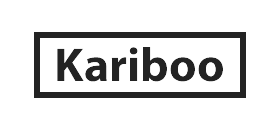
<style>
.page{position:relative;width:276px;height:126px;background:#ffffff}
.page>*{position:absolute;margin:0}
.t1{font:48px "MyriadPro-Bold";color:#232323}
</style>
<div class="page">
<p class="t1" style="left:57px;top:47px;width:166px;height:35px">Kariboo</p>
</div>
